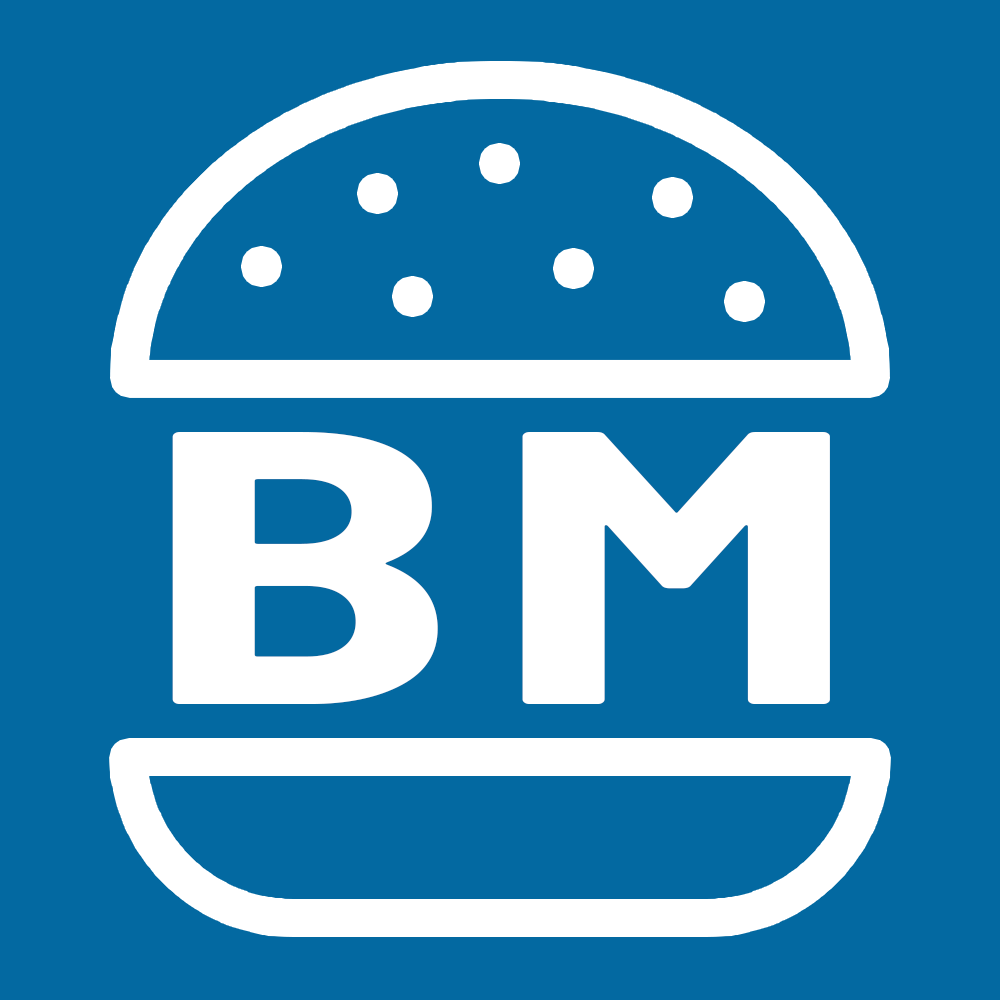
<style>
.page{position:relative;width:1000px;height:1000px;background:#0369a1}
.page>*{position:absolute;margin:0}
.t1{font:388.5px "BarlowSemiCondensed-Bold";letter-spacing:0.06em;color:#ffffff;scale:1.49 1}
</style>
<div class="page">
<p class="t1" style="left:172px;top:432px;width:658px;height:272px">BM</p>
</div>
